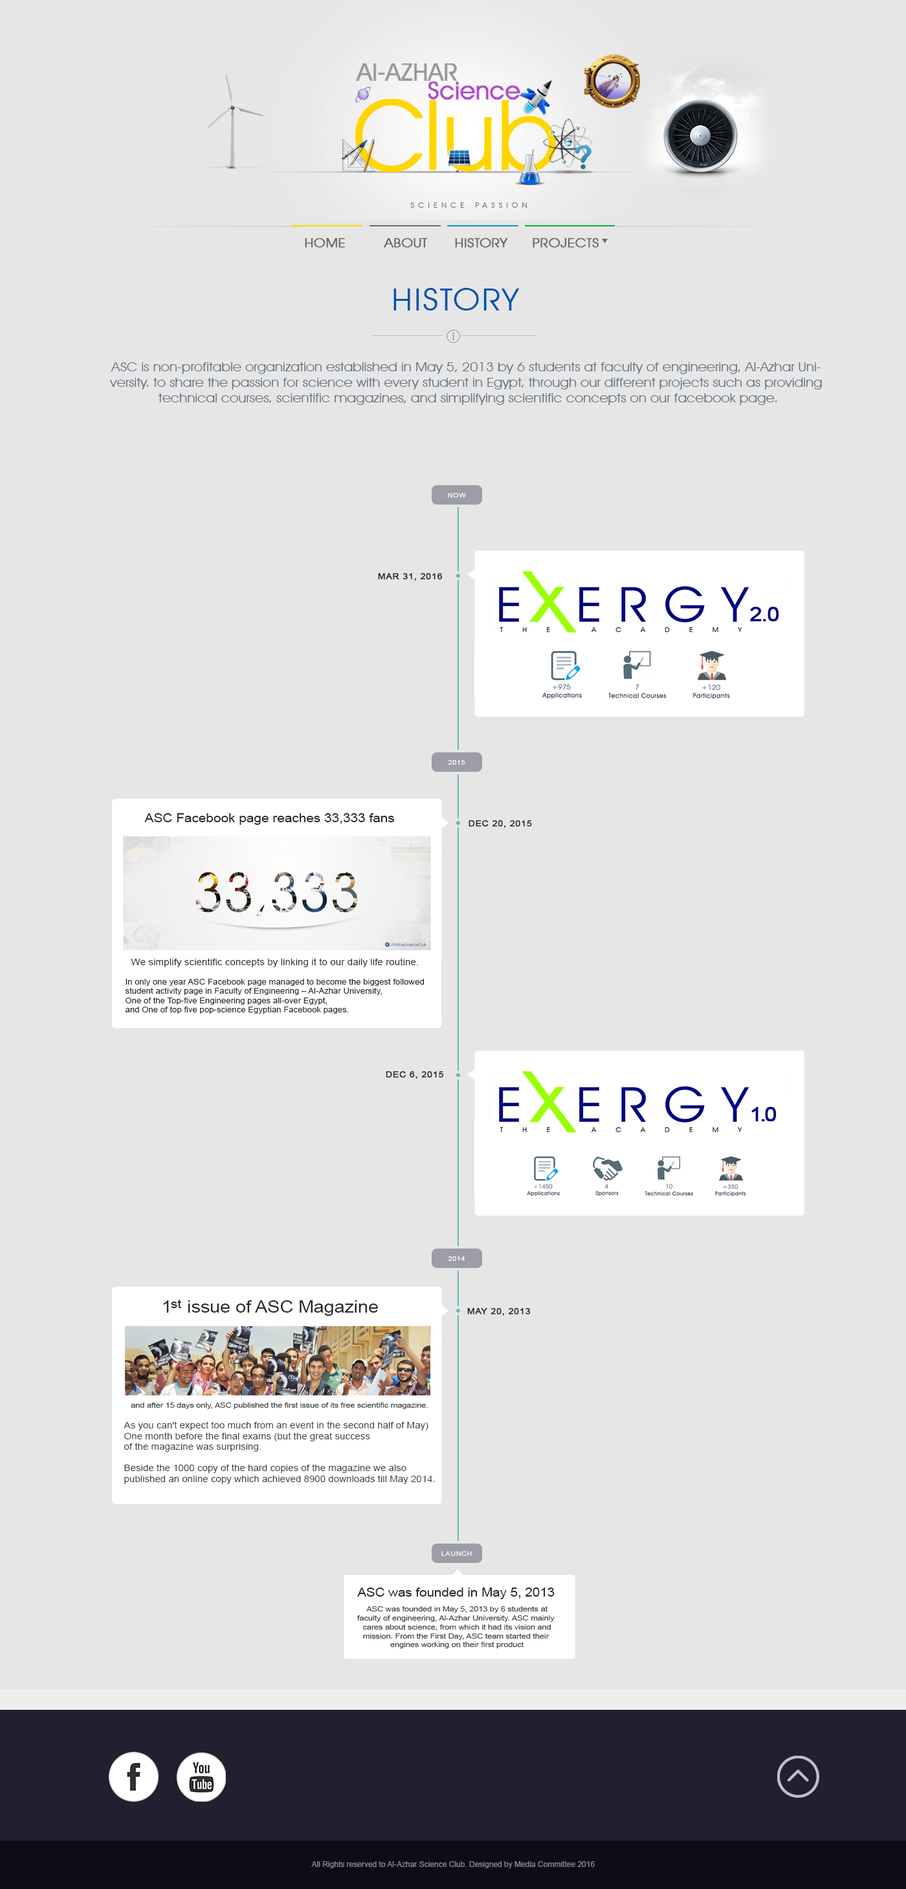
<style>
.page{position:relative;width:906px;height:1889px;background:#e6e6e6}
.page>*{position:absolute;margin:0}
.t1{font:13.2px "AvantGardeITCbyBT-Book";color:#6c6c6c;font-weight:bold;scale:1.11 1}
.t2{font:31px "AvantGardeITCbyBT-Book";letter-spacing:0.05em;color:#0053ad;font-variant:small-caps;scale:1.1 1}
.t3{font:13px "AvantGardeITCbyBT-Book";letter-spacing:-0.01em;color:#60707f;scale:1.1 1}
.t4{font:6.4px "ArialMT";letter-spacing:0.05em;color:#ffffff;scale:1.1 1}
.t5{font:8.1px "ArialMT";letter-spacing:0.05em;color:#282828;font-weight:bold;scale:1.1 1}
.t6{font:19.9px "ArialMT";letter-spacing:-0.05em;color:#00077d;font-weight:bold;scale:1.1 1}
.t7{font:12.2px "ArialMT";color:#282828;scale:1.1 1}
.t8{font:9px "ArialMT";color:#282828;scale:1.1 1}
.t9{font:7.7px "ArialMT";color:#282828;scale:1.1 1}
.t10{font:19.9px "ArialMT";letter-spacing:-0.1em;color:#00077d;font-weight:bold;scale:1.1 1}
.t11{font:16.8px "ArialMT";color:#282828;scale:1.1 1}
.t12{font:12.4px "ArialMT";color:#282828;scale:1.1 1}
.t13{font:7.4px "ArialMT";color:#414040;scale:1.1 1}
.t14{font:8.9px "ArialMT";color:#414040;scale:1.1 1}
.t15{font:12.1px "ArialMT";color:#282828;scale:1.1 1}
</style>
<div class="page">
<p class="t1" style="left:305px;top:238px;width:40px;height:10px">HOME</p>
<p class="t1" style="left:384px;top:238px;width:44px;height:10px">ABOUT</p>
<p class="t1" style="left:455px;top:238px;width:53px;height:10px">HISTORY</p>
<p class="t1" style="left:532px;top:238px;width:67px;height:10px">PROJECTS</p>
<p class="t2" style="left:393px;top:288px;width:126px;height:22px">HISTORY</p>
<p class="t3" style="left:109px;top:362px;width:712px;height:43px;text-align:center">ASC is non-profitable organization established in May 5, 2013 by 6 students at faculty of engineering, Al-Azhar Uni-<br>versity. to share the passion for science with every student in Egypt, through our different projects such as providing<br> technical courses, scientific magazines, and simplifying scientific concepts on our facebook page.</p>
<p class="t4" style="left:448px;top:493px;width:18px;height:4px">NOW</p>
<p class="t5" style="left:378px;top:573px;width:64px;height:8px">MAR 31, 2016</p>
<p class="t6" style="left:750px;top:607px;width:29px;height:15px">2.0</p>
<p class="t4" style="left:448px;top:760px;width:17px;height:5px">2015</p>
<p class="t7" style="left:144px;top:813px;width:251px;height:12px">ASC Facebook page reaches 33,333 fans</p>
<p class="t5" style="left:468px;top:820px;width:64px;height:8px">DEC 20, 2015</p>
<p class="t8" style="left:131px;top:958px;width:287px;height:9px">We simplify scientific concepts by linking it to our daily life routine.</p>
<p class="t9" style="left:125px;top:979px;width:299px;height:35px">In only one year ASC Facebook page managed to become the biggest followed<br>student activity page in Faculty of Engineering – Al-Azhar University,<br>One of the Top-five Engineering pages all-over Egypt,<br>and One of top five pop-science Egyptian Facebook pages.</p>
<p class="t5" style="left:386px;top:1071px;width:58px;height:8px">DEC 6, 2015</p>
<p class="t10" style="left:751px;top:1107px;width:25px;height:15px">1.0</p>
<p class="t4" style="left:448px;top:1256px;width:17px;height:5px">2014</p>
<p class="t11" style="left:163px;top:1300px;width:215px;height:16px">1   issue of ASC Magazine</p>
<p class="t12" style="left:171px;top:1299px;width:10px;height:9px">st</p>
<p class="t5" style="left:467px;top:1308px;width:63px;height:8px">MAY 20, 2013</p>
<p class="t13" style="left:131px;top:1402px;width:297px;height:7px">and after 15 days only, ASC published the first issue of its free scientific magazine.</p>
<p class="t14" style="left:124px;top:1421px;width:311px;height:63px">As you can't expect too much from an event in the second half of May)<br>One month before the final exams (but the great success<br>of the magazine was surprising.<br><br>Beside the 1000 copy of the hard copies of the magazine we also<br>published an online copy which achieved 8900 downloads till May 2014.</p>
<p class="t4" style="left:441px;top:1551px;width:31px;height:5px">LAUNCH</p>
<p class="t15" style="left:357px;top:1587px;width:197px;height:12px">ASC was founded in May 5, 2013</p>
<p class="t13" style="left:357px;top:1606px;width:197px;height:42px;text-align:center">ASC was founded in May 5, 2013 by 6 students at<br>faculty of engineering, Al-Azhar University. ASC mainly <br>cares about science, from which it had its vision and<br>mission. From the First Day, ASC team started their <br>engines working on their first product</p>
</div>
